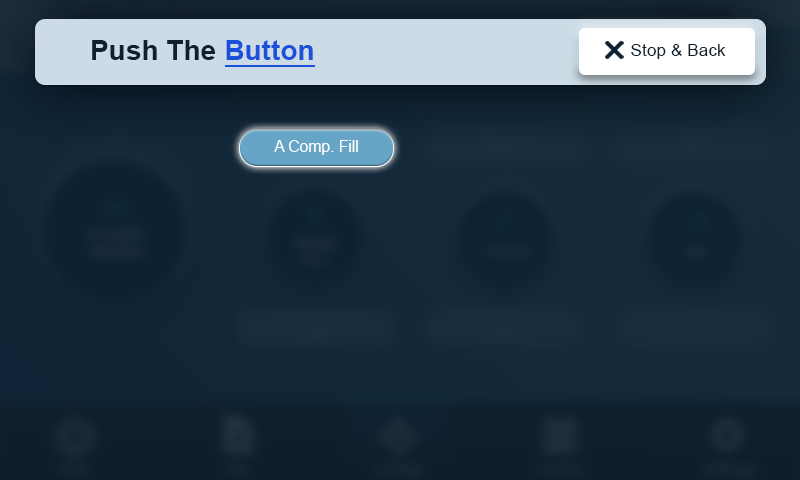
<style>
.page{position:relative;width:800px;height:480px}
.page>*{position:absolute;margin:0}
.t1{font:27.8px "Arial-BoldMT";letter-spacing:0.01em;color:#0f202f}
.t2{font:27.8px "Arial-BoldMT";letter-spacing:0.01em;color:#1b51da}
.t3{font:17.1px "ArialMT";letter-spacing:0.01em;color:#0f202f}
.t4{font:15.6px "ArialMT";color:#ffffff}
</style>
<div class="page">
<p class="t1" style="left:92px;top:40px;width:221px;height:20px">Push The <span class="t2">Button</span></p>
<p class="t3" style="left:631px;top:44px;width:95px;height:15px">Stop &amp; Back</p>
<p class="t4" style="left:274px;top:140px;width:84px;height:15px">A Comp. Fill</p>
</div>
